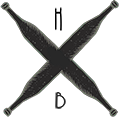
<style>
.page{position:relative;width:120px;height:120px;background:#ffffff}
.page>*{position:absolute;margin:0}
.t1{font:30.3px "HipsterishFontNormal";color:#000000;font-weight:bold;scale:0.84 1}
.t2{font:21.6px "HipsterishFontNormal";color:#282828;font-weight:bold;scale:1.28 1}
</style>
<div class="page">
<p class="t1" style="left:55px;top:7px;width:7px;height:24px">H</p>
<p class="t2" style="left:55px;top:92px;width:11px;height:17px">B</p>
</div>
